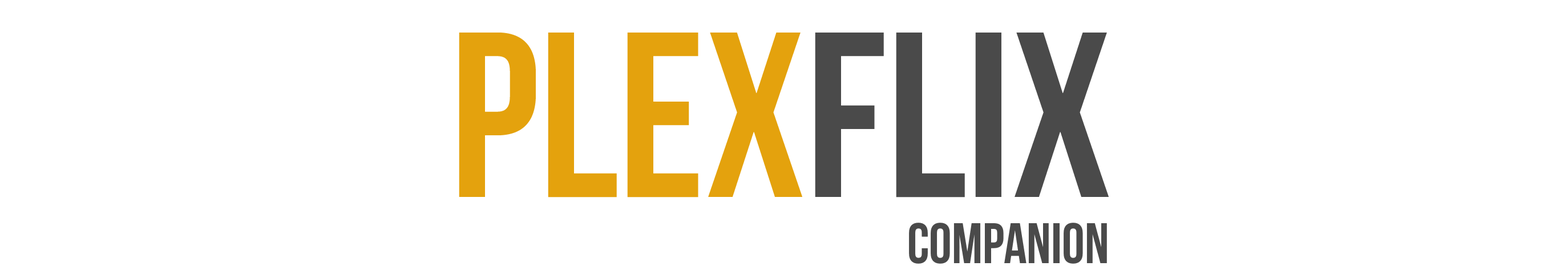
<style>
.page{position:relative;width:1568px;height:274px;background:#ffffff}
.page>*{position:absolute;margin:0}
.t1{font:235.1px "BebasNeue";color:#e4a20d}
.t2{font:235.1px "BebasNeue";color:#4a4a4a}
.t3{font:57.1px "BebasNeue";color:#4a4a4a}
</style>
<div class="page">
<p class="t1" style="left:459px;top:33px;width:650px;height:164px">Plex<span class="t2">flix</span></p>
<p class="t3" style="left:909px;top:223px;width:198px;height:41px">companion</p>
</div>
